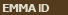
<style>
.page{position:relative;width:68px;height:15px;background:#553b1e}
.page>*{position:absolute;margin:0}
.t1{font:11px "Verdana-Bold";letter-spacing:-0.08em;color:#dedbcb}
.t2{font:11px "Arial-BoldMT";letter-spacing:-0.08em;color:#dedbcb}
</style>
<div class="page">
<p class="t1" style="left:2px;top:4px;width:48px;height:8px">EMMA <span class="t2">I</span>D</p>
</div>
